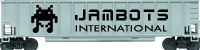
<style>
.page{position:relative;width:200px;height:50px}
.page>*{position:absolute;margin:0}
.t1{font:16px "Futura";letter-spacing:-0.015em;color:#000000}
.t2{font:8px "Futura-Book";letter-spacing:0.075em;color:#000000;scale:1.4 1}
</style>
<div class="page">
<p class="t1" style="left:75px;top:9px;width:93px;height:12px">jambots</p>
<p class="t2" style="left:75px;top:25px;width:92px;height:7px">INTERNATIONAL</p>
</div>
